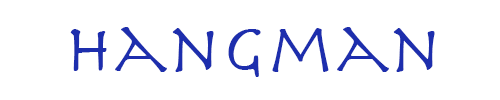
<style>
.page{position:relative;width:500px;height:100px;background:#ffffff}
.page>*{position:absolute;margin:0}
.t1{font:72px "Herculanum";color:#1d2eae}
</style>
<div class="page">
<p class="t1" style="left:70px;top:27px;width:365px;height:50px">Hangman</p>
</div>
